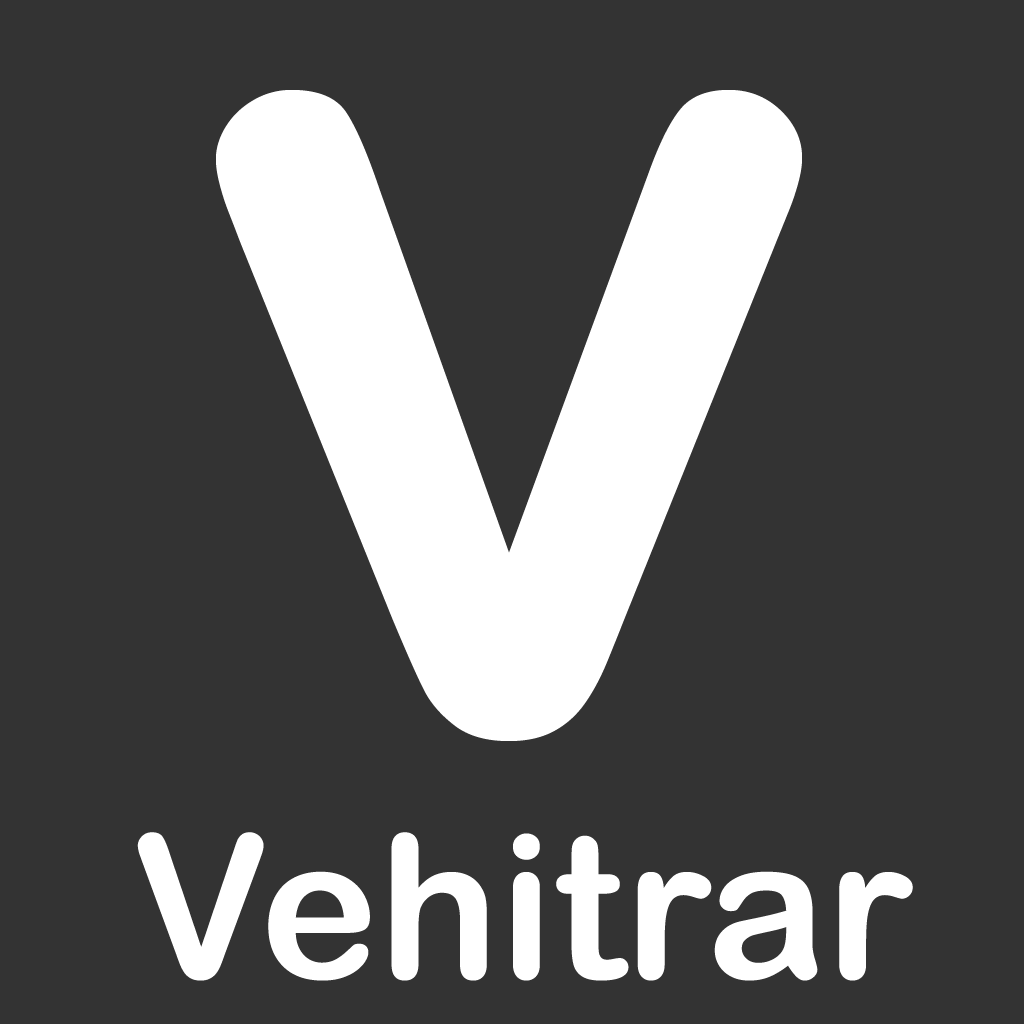
<style>
.page{position:relative;width:1024px;height:1024px;background:#333333}
.page>*{position:absolute;margin:0}
.t1{font:1200px "ArialRoundedMTBold";color:#ffffff}
.t2{font:200px "ArialRoundedMTBold";color:#ffffff}
</style>
<div class="page">
<p class="t1" style="left:216px;top:90px;width:586px;height:651px">v</p>
<p class="t2" style="left:137px;top:832px;width:776px;height:149px">Vehitrar</p>
</div>
